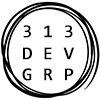
<style>
.page{position:relative;width:100px;height:100px;background:#ffffff}
.page>*{position:absolute;margin:0}
.t1{font:18px "Consolas";color:#000000;font-weight:bold}
</style>
<div class="page">
<p class="t1" style="left:22px;top:25px;width:52px;height:56px;text-align:center">3 1 3<br>D E V<br>G R P</p>
</div>
